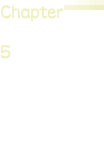
<style>
.page{position:relative;width:104px;height:160px;background:#ffffff}
.page>*{position:absolute;margin:0}
.t1{font:24.2px "DFLeiShoStd-W5";letter-spacing:-0.025em;color:#efeebe;scale:0.8 1}
.t2{font:24.2px "DFLeiShoStd-W5";letter-spacing:-0.025em;color:#efeebe;scale:0.83 1}
</style>
<div class="page">
<p class="t1" style="left:1px;top:5px;width:62px;height:17px">Chapter</p>
<p class="t2" style="left:0px;top:45px;width:11px;height:14px">5</p>
</div>
